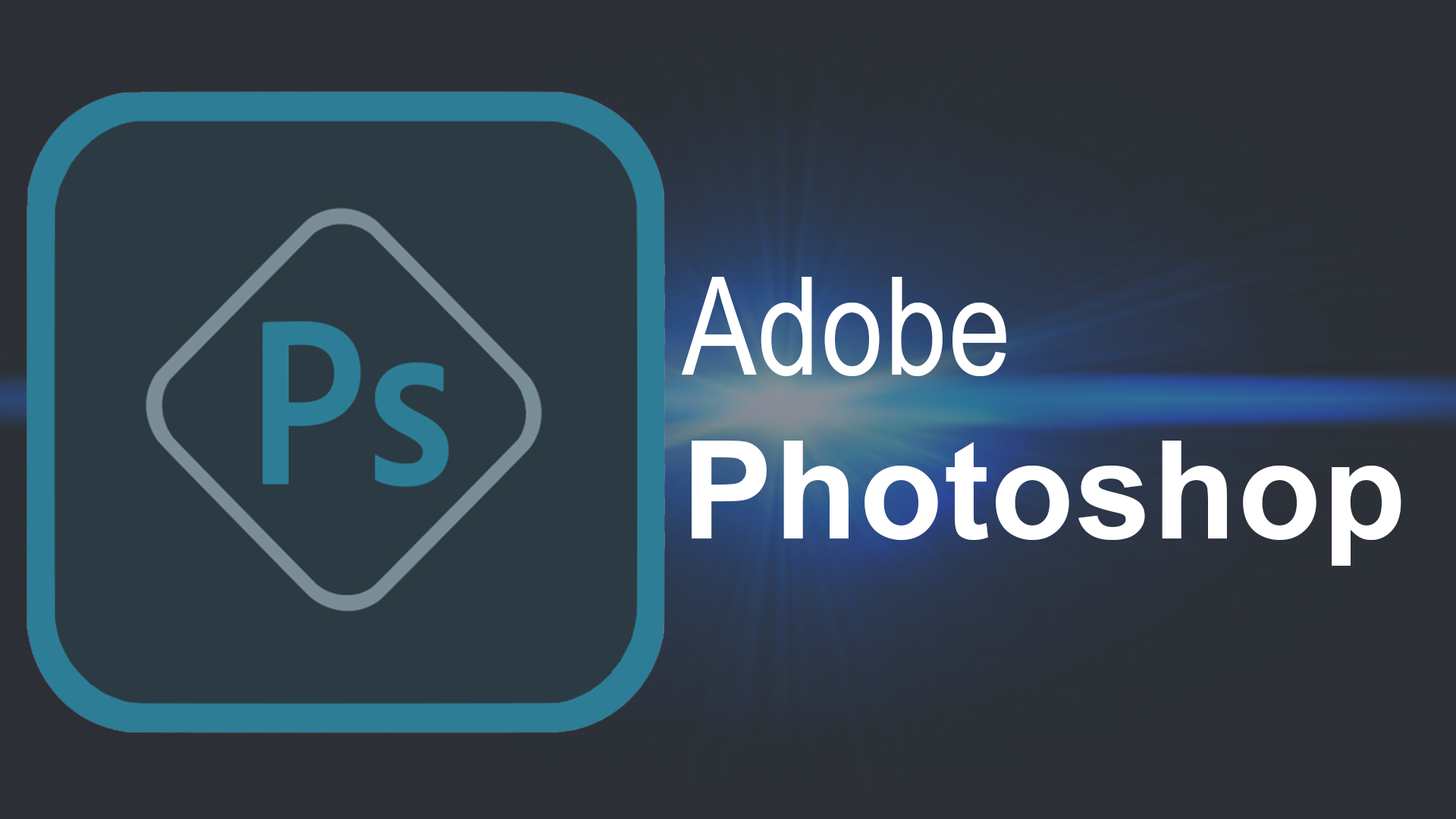
<style>
.page{position:relative;width:1456px;height:819px;background:#2c3b43}
.page>*{position:absolute;margin:0}
.t1{font:136.6px "Arial-BoldMT";letter-spacing:0.01em;color:#ffffff}
.t2{font:136.6px "ArialNarrow";letter-spacing:0.01em;color:#ffffff}
</style>
<div class="page">
<p class="t1" style="left:682px;top:277px;width:719px;height:289px"><span class="t2">Adobe<br></span>Photoshop</p>
</div>
